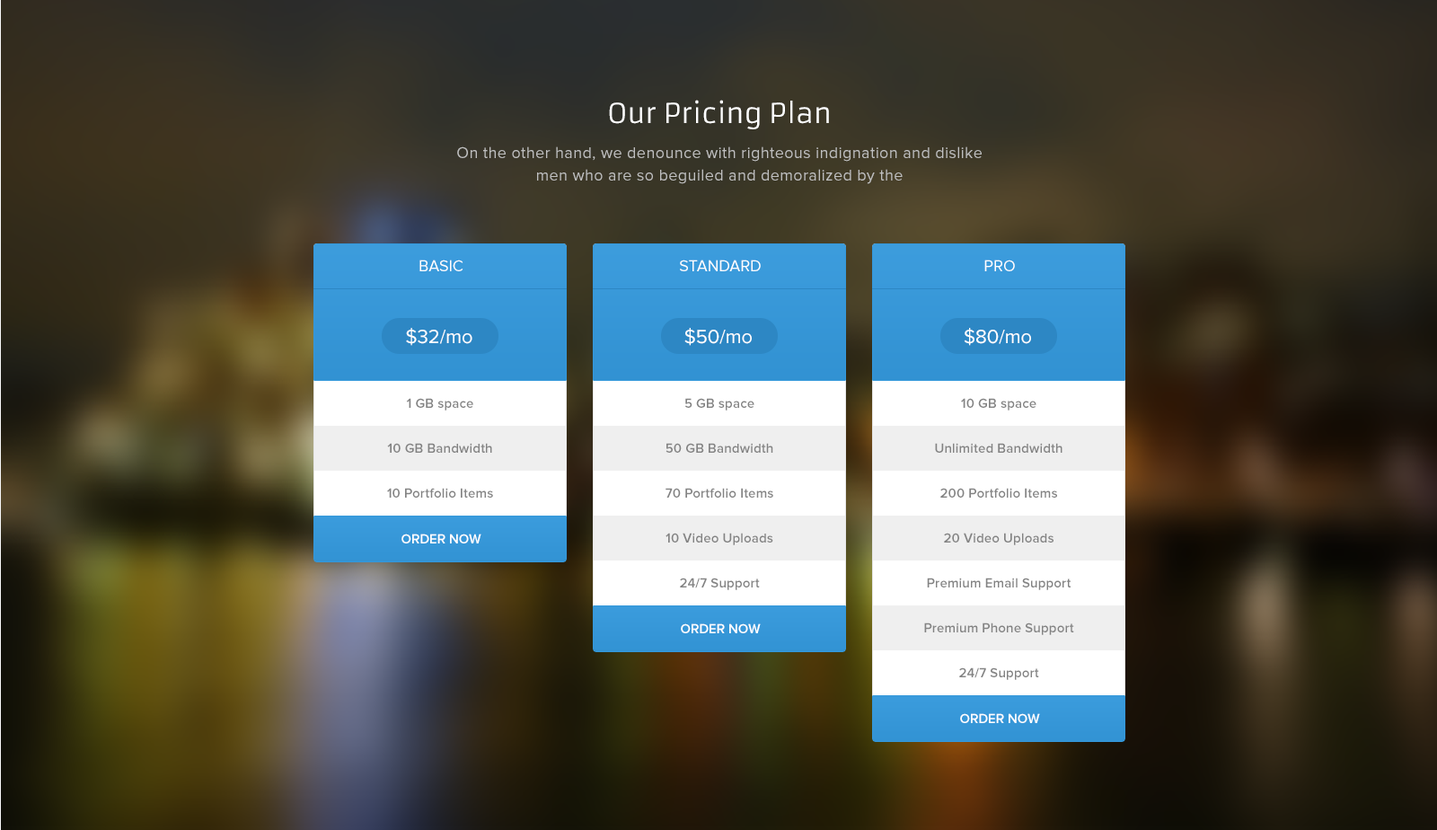
<style>
.page{position:relative;width:1437px;height:830px}
.page>*{position:absolute;margin:0}
.t1{font:26.9px "Armata-Regular";color:#ffffff}
.t2{font:16.2px/22.5px "ProximaNova-Regular";letter-spacing:0.022em;color:#c0c0c0}
.t3{font:16.2px "ProximaNova-Regular";color:#ffffff}
.t4{font:19.8px "ProximaNova-Regular";color:#ffffff}
.t5{font:13.5px/44.9px "ProximaNova-Semibold";letter-spacing:0.01em;color:#838383}
.t6{font:13.5px "ProximaNova-Semibold";color:#ffffff}
</style>
<div class="page">
<p class="t1" style="left:609px;top:100px;width:220px;height:29px">Our Pricing Plan</p>
<p class="t2" style="left:457px;top:146px;width:525px;height:38px;text-align:center">On the other hand, we denounce with righteous indignation and dislike men who are so beguiled and demoralized by the</p>
<p class="t3" style="left:419px;top:260px;width:44px;height:11px">BASIC</p>
<p class="t3" style="left:680px;top:260px;width:81px;height:11px">STANDARD</p>
<p class="t3" style="left:984px;top:260px;width:31px;height:11px">PRO</p>
<p class="t4" style="left:406px;top:328px;width:66px;height:18px">$32/mo</p>
<p class="t4" style="left:684px;top:328px;width:68px;height:18px">$50/mo</p>
<p class="t4" style="left:964px;top:328px;width:67px;height:18px">$80/mo</p>
<p class="t5" style="left:387px;top:398px;width:106px;height:100px;text-align:center">1 GB space<br>10 GB Bandwidth<br>10 Portfolio Items</p>
<p class="t5" style="left:665px;top:398px;width:108px;height:192px;text-align:center">5 GB space<br>50 GB Bandwidth<br>70 Portfolio Items<br>10 Video Uploads<br>24/7 Support</p>
<p class="t5" style="left:924px;top:398px;width:150px;height:282px;text-align:center">10 GB space<br>Unlimited Bandwidth<br>200 Portfolio Items<br>20 Video Uploads<br>Premium Email Support<br>Premium Phone Support<br>24/7 Support</p>
<p class="t6" style="left:401px;top:533px;width:80px;height:10px">ORDER NOW</p>
<p class="t6" style="left:681px;top:623px;width:80px;height:10px">ORDER NOW</p>
<p class="t6" style="left:960px;top:713px;width:80px;height:10px">ORDER NOW</p>
</div>
